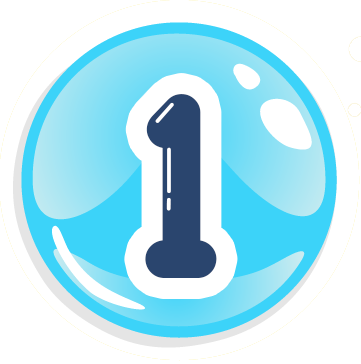
<style>
.page{position:relative;width:361px;height:364px;background:#ffffff}
.page>*{position:absolute;margin:0}
.t1{font:262.5px "BubbleBobble";color:#2a456e}
</style>
<div class="page">
<p class="t1" style="left:145px;top:94px;width:72px;height:184px">1</p>
</div>
